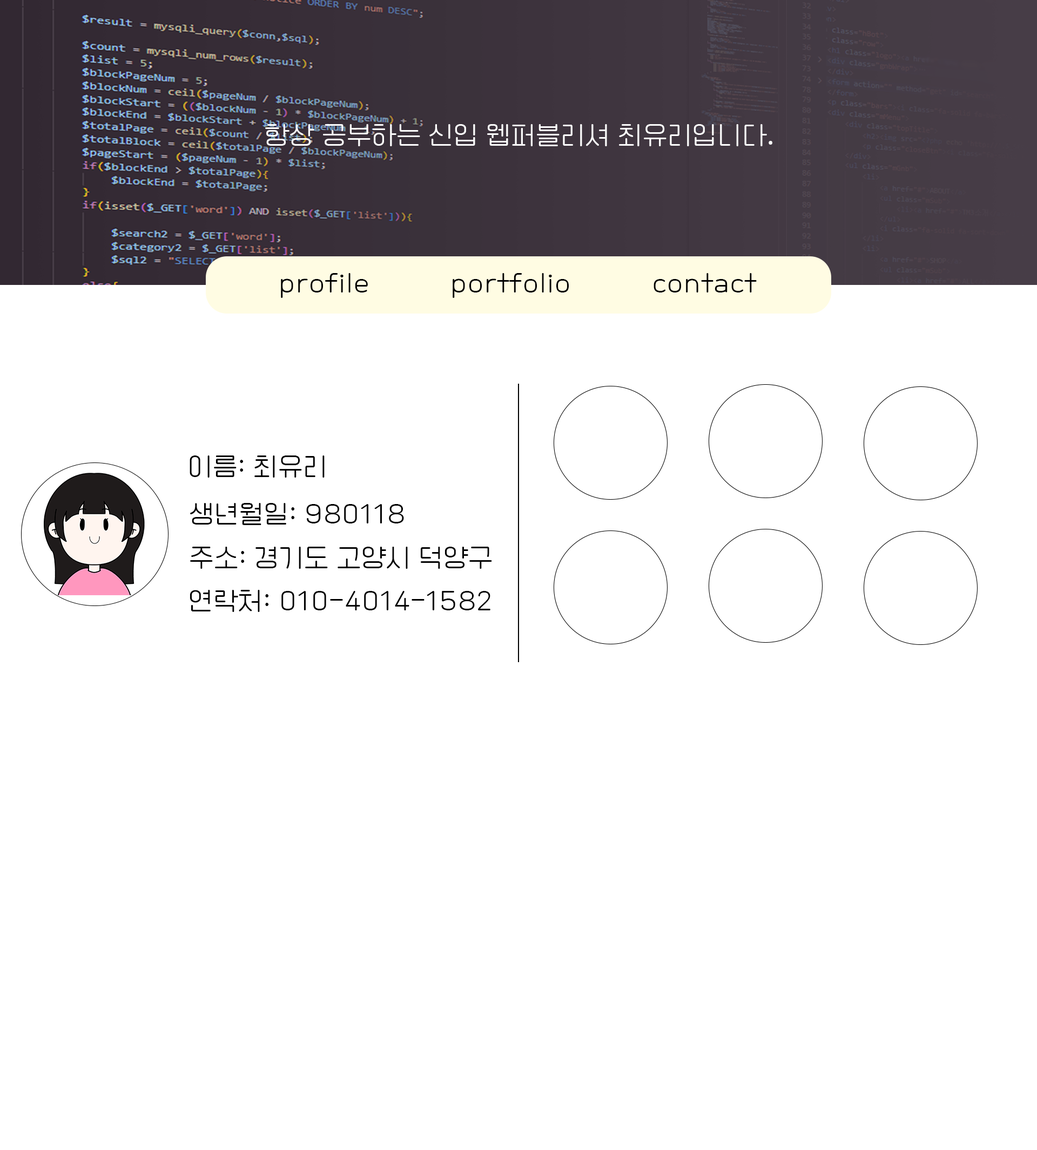
<style>
.page{position:relative;width:1037px;height:1150px;background:#ffffff}
.page>*{position:absolute;margin:0}
.t1{font:25.9px "Cafe24Ssurroundair";color:#ffffff}
.t2{font:25.9px "Cafe24Ssurroundair";color:#000000}
</style>
<div class="page">
<p class="t1" style="left:265px;top:124px;width:507px;height:22px">항상 공부하는 신입 웹퍼블리셔 최유리입니다.</p>
<p class="t2" style="left:281px;top:273px;width:87px;height:25px">profile</p>
<p class="t2" style="left:452px;top:273px;width:117px;height:25px">portfolio</p>
<p class="t2" style="left:653px;top:273px;width:103px;height:20px">contact</p>
<p class="t2" style="left:189px;top:456px;width:135px;height:22px">이름: 최유리</p>
<p class="t2" style="left:190px;top:503px;width:214px;height:22px">생년월일: 980118</p>
<p class="t2" style="left:190px;top:547px;width:302px;height:22px">주소: 경기도 고양시 덕양구</p>
<p class="t2" style="left:189px;top:590px;width:301px;height:22px">연락처: 010-4014-1582</p>
</div>
